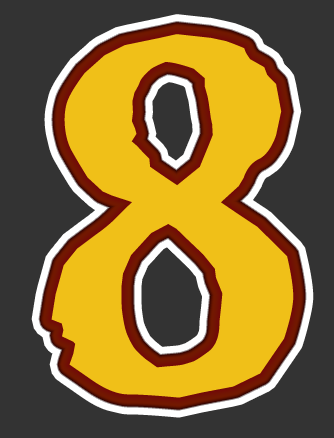
<style>
.page{position:relative;width:334px;height:438px;background:#333333}
.page>*{position:absolute;margin:0}
.t1{font:550px "PiecesofEight";letter-spacing:0.18em;color:#f0c018}
</style>
<div class="page">
<p class="t1" style="left:51px;top:34px;width:243px;height:364px">8</p>
</div>
